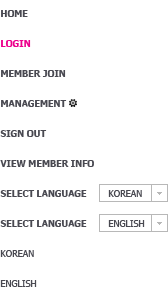
<style>
.page{position:relative;width:168px;height:287px;background:#ffffff}
.page>*{position:absolute;margin:0}
.t1{font:9px/30px "Tahoma-Bold";color:#494951;text-transform:uppercase}
.t2{font:9px/30px "Tahoma-Bold";color:#ec008c;text-transform:uppercase}
.t3{font:9px/30px "Tahoma";color:#494951;text-transform:uppercase}
</style>
<div class="page">
<p class="t1" style="left:0px;top:10px;width:145px;height:277px">home      <br><span class="t2">LOGIN</span>       <br>MEMBER JOIN<br>management<br>Sign Out<br>View Member Info  <br>select language <span class="t3">korean      <br></span>select language <span class="t3">English<br>korean <br>English</span></p>
</div>
